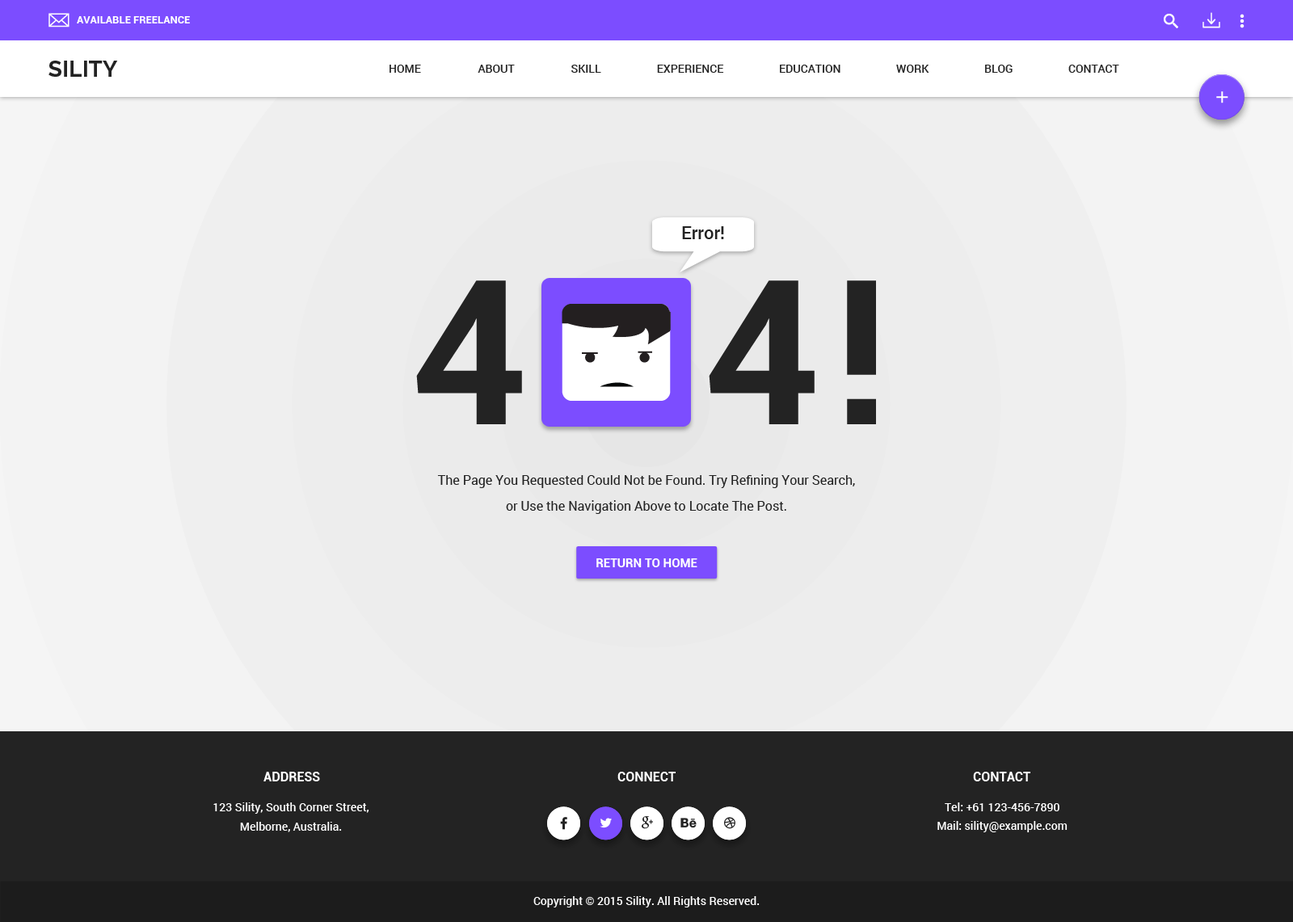
<style>
.page{position:relative;width:1293px;height:922px}
.page>*{position:absolute;margin:0}
.t1{font:10.5px "Roboto-Bold";color:#ffffff;text-transform:uppercase}
.t2{font:22.6px "Raleway-Bold";color:#232323}
.t3{font:11.3px "Roboto-Medium";color:#232323;text-transform:uppercase}
.t4{font:17.8px "Roboto-Medium";color:#232323}
.t5{font:202px "Roboto-Bold";letter-spacing:0.15em;color:#232323}
.t6{font:12.9px/25.9px "Roboto-Regular";color:#232323}
.t7{font:12.1px "Roboto-Bold";color:#ffffff}
.t8{font:12.9px "Roboto-Bold";color:#ffffff;text-transform:uppercase}
.t9{font:11.3px/19.4px "Roboto-Medium";color:#ffffff}
.t10{font:11.3px "Roboto-Medium";color:#ffffff}
</style>
<div class="page">
<p class="t1" style="left:77px;top:16px;width:113px;height:7px">available freelance</p>
<p class="t2" style="left:48px;top:61px;width:70px;height:16px">SILITY</p>
<p class="t3" style="left:390px;top:65px;width:31px;height:8px">home</p>
<p class="t3" style="left:478px;top:65px;width:37px;height:8px">about</p>
<p class="t3" style="left:571px;top:65px;width:30px;height:8px">skill</p>
<p class="t3" style="left:657px;top:65px;width:67px;height:8px">experience</p>
<p class="t3" style="left:780px;top:65px;width:61px;height:8px">education</p>
<p class="t3" style="left:896px;top:65px;width:33px;height:8px">work</p>
<p class="t3" style="left:985px;top:65px;width:28px;height:8px">blog</p>
<p class="t3" style="left:1068px;top:65px;width:51px;height:8px">Contact</p>
<p class="t4" style="left:682px;top:226px;width:42px;height:13px">Error!</p>
<p class="t5" style="left:416px;top:278px;width:399px;height:149px">404</p>
<p class="t5" style="left:847px;top:280px;width:29px;height:144px">!</p>
<p class="t6" style="left:437px;top:474px;width:418px;height:40px;text-align:center">The Page You Requested Could Not be Found. Try Refining Your Search,<br>or Use the Navigation Above to Locate The Post.</p>
<p class="t7" style="left:596px;top:558px;width:101px;height:9px">RETURN TO HOME</p>
<p class="t8" style="left:263px;top:772px;width:57px;height:10px">Address</p>
<p class="t8" style="left:617px;top:772px;width:59px;height:10px">connect</p>
<p class="t8" style="left:973px;top:772px;width:57px;height:10px">contact</p>
<p class="t9" style="left:213px;top:803px;width:156px;height:29px;text-align:center">123 Sility, South Corner Street,<br>Melborne, Australia.</p>
<p class="t10" style="left:945px;top:803px;width:115px;height:8px">Tel: +61 123-456-7890</p>
<p class="t10" style="left:938px;top:821px;width:130px;height:11px">Mail: sility@example.com</p>
<p class="t10" style="left:533px;top:896px;width:227px;height:12px">Copyright © 2015 Sility. All Rights Reserved.</p>
</div>
